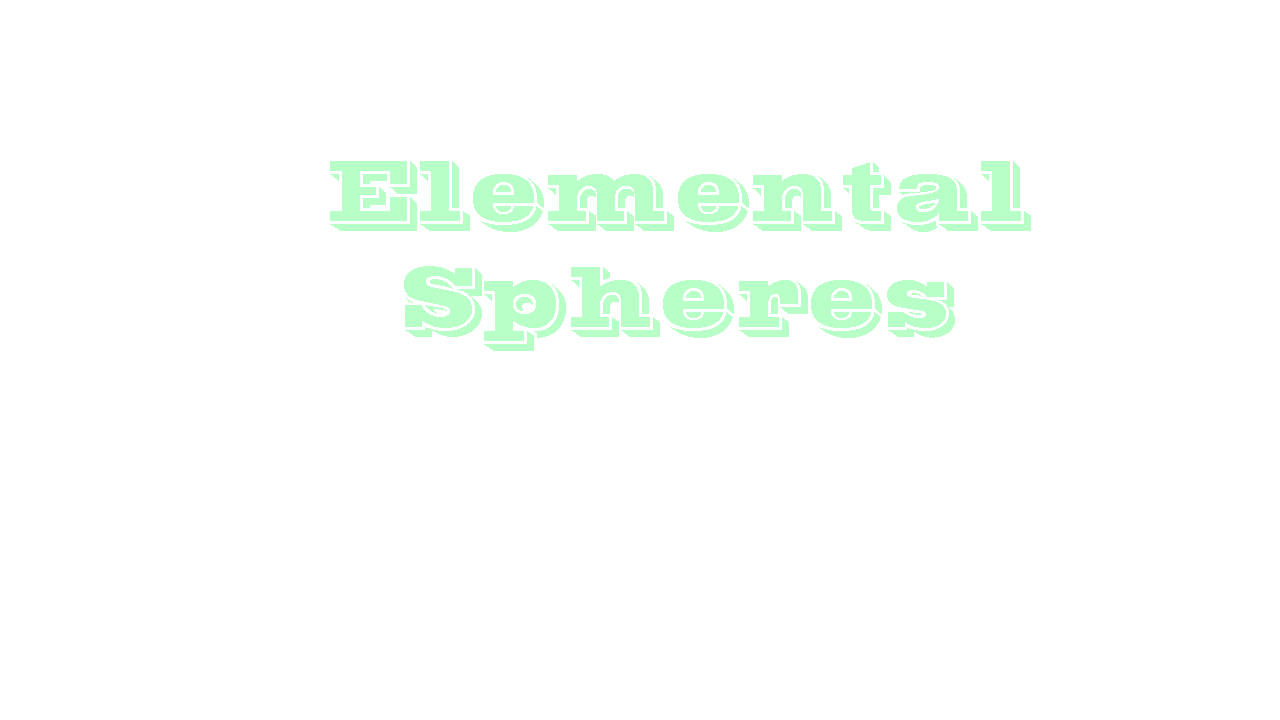
<style>
.page{position:relative;width:1280px;height:720px;background:#ffffff}
.page>*{position:absolute;margin:0}
.t1{font:88.7px "VinetaBT-Regular";color:#b8ffc7}
</style>
<div class="page">
<p class="t1" style="left:330px;top:161px;width:701px;height:190px;text-align:center">Elemental Spheres</p>
</div>
